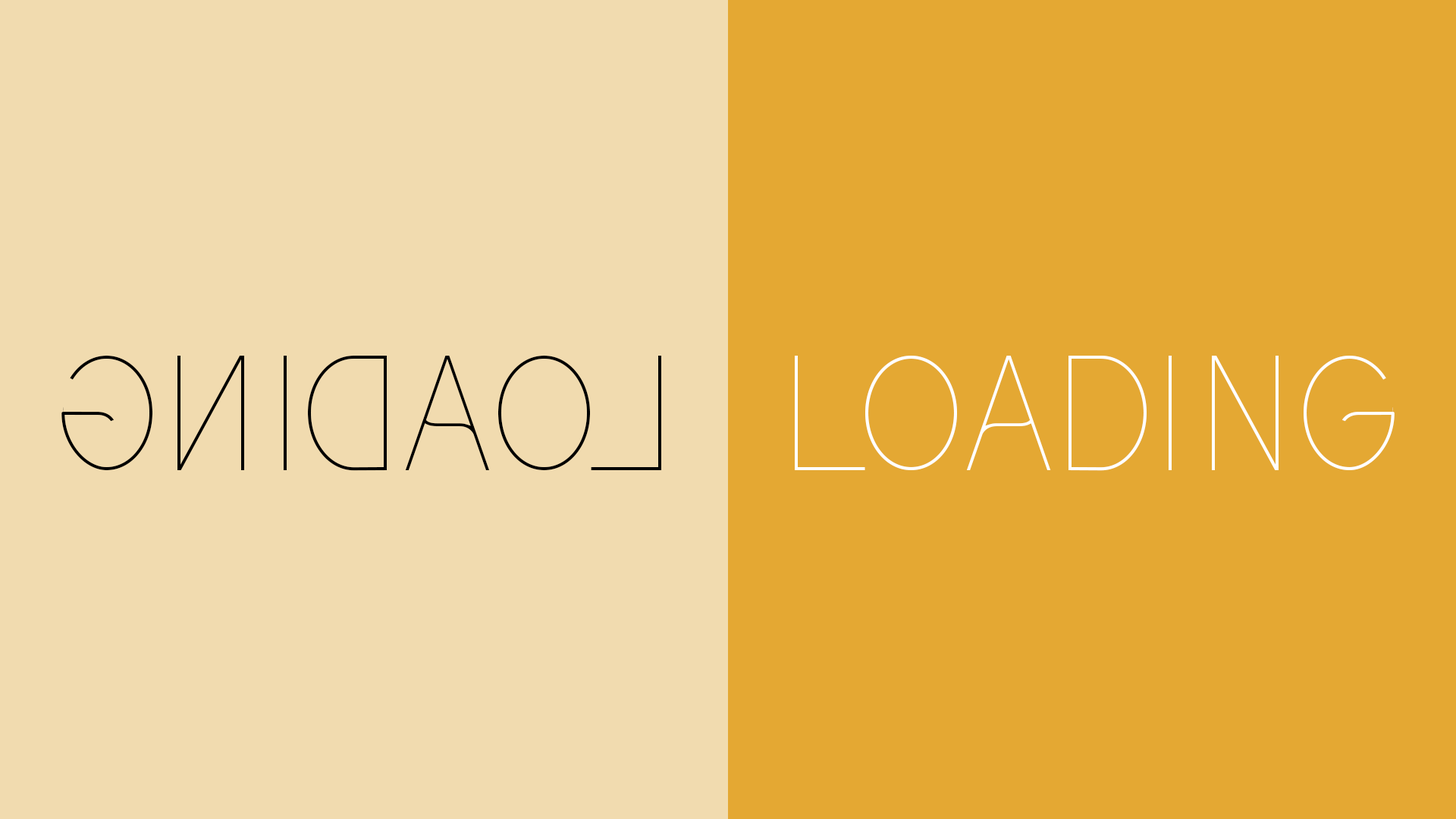
<style>
.page{position:relative;width:1456px;height:819px;background:#e4a833}
.page>*{position:absolute;margin:0}
.t1{font:151.7px "Kirvy-Thin";color:#000000}
.t2{font:151.7px "Kirvy-Thin";color:#ffffff}
</style>
<div class="page">
<p class="t1" style="left:61px;top:356px;width:600px;height:115px;rotate:180deg">LOADING</p>
<p class="t2" style="left:795px;top:356px;width:600px;height:115px">LOADING</p>
</div>
